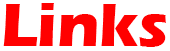
<style>
.page{position:relative;width:170px;height:51px;background:#ffffff}
.page>*{position:absolute;margin:0}
.t1{font:63.1px "ErasITC-Bold";color:#ff0000}
</style>
<div class="page">
<p class="t1" style="left:3px;top:3px;width:163px;height:44px">Links</p>
<p class="t1" style="left:4px;top:4px;width:163px;height:44px">Links</p>
</div>
